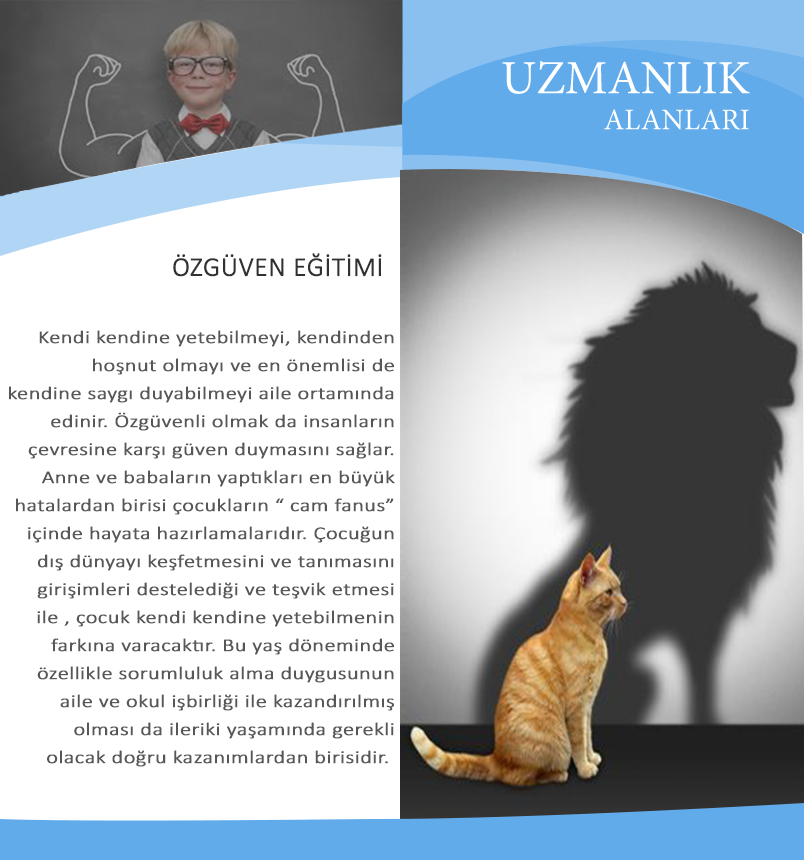
<style>
.page{position:relative;width:804px;height:860px;background:#ffffff}
.page>*{position:absolute;margin:0}
.t1{font:47.6px "MinionPro-Regular";color:#ffffff}
.t2{font:30px "MinionPro-Regular";color:#ffffff}
.t3{font:27px "Calibri-Light";color:#313131;font-weight:bold}
.t4{font:18.1px/28px "Calibri-Light";color:#575757;font-weight:bold;scale:1.22 1}
</style>
<div class="page">
<p class="t1" style="left:502px;top:61px;width:248px;height:69px;text-align:right">UZMANLIK<br><span class="t2"> ALANLARI</span></p>
<p class="t3" style="left:173px;top:253px;width:209px;height:24px">ÖZGÜVEN EĞİTİMİ</p>
<p class="t4" style="left:9px;top:330px;width:386px;height:437px;text-align:right">Kendi kendine yetebilmeyi, kendinden<br> hoşnut olmayı ve en önemlisi de<br> kendine saygı duyabilmeyi aile ortamında<br> edinir. Özgüvenli olmak da insanların<br> çevresine karşı güven duymasını sağlar.<br> Anne ve babaların yaptıkları en büyük<br> hatalardan birisi çocukların “ cam fanus”<br> içinde hayata hazırlamalarıdır. Çocuğun<br> dış dünyayı keşfetmesini ve tanımasını<br> girişimleri destelediği ve teşvik etmesi<br> ile , çocuk kendi kendine yetebilmenin<br> farkına varacaktır. Bu yaş döneminde<br> özellikle sorumluluk alma duygusunun<br> aile ve okul işbirliği ile kazandırılmış<br> olması da ileriki yaşamında gerekli<br> olacak doğru kazanımlardan birisidir.</p>
</div>
